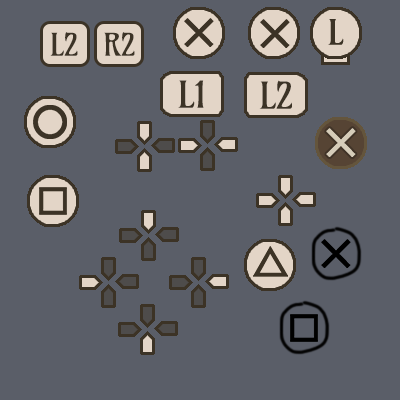
<style>
.page{position:relative;width:400px;height:400px;background:#5a5e68}
.page>*{position:absolute;margin:0}
.t1{font:30px "Amarante-Regular";color:#3c3326}
.t2{font:36px "Amarante-Regular";color:#3c3326}
</style>
<div class="page">
<p class="t1" style="left:50px;top:32px;width:28px;height:24px">L2</p>
<p class="t1" style="left:104px;top:32px;width:31px;height:24px">R2</p>
<p class="t2" style="left:178px;top:80px;width:26px;height:28px">L1</p>
<p class="t2" style="left:178px;top:80px;width:26px;height:28px">L1</p>
<p class="t2" style="left:259px;top:80px;width:33px;height:29px">L2</p>
<p class="t2" style="left:259px;top:80px;width:33px;height:29px">L2</p>
</div>
